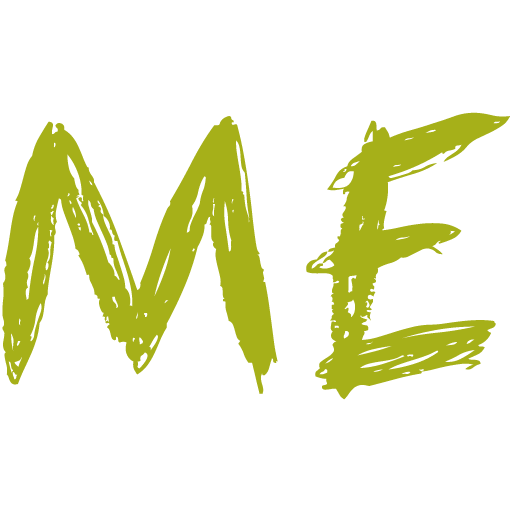
<style>
.page{position:relative;width:512px;height:512px;background:#ffffff}
.page>*{position:absolute;margin:0}
.t1{font:402px "beermoney";letter-spacing:0.05em;color:#a6b019;text-transform:uppercase}
</style>
<div class="page">
<p class="t1" style="left:2px;top:112px;width:508px;height:288px">ME</p>
</div>
